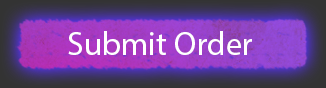
<style>
.page{position:relative;width:326px;height:88px}
.page>*{position:absolute;margin:0}
.t1{font:33px "MyriadPro-Regular";color:#ffffff}
</style>
<div class="page">
<p class="t1" style="left:68px;top:31px;width:184px;height:24px">Submit Order</p>
</div>
